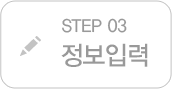
<style>
.page{position:relative;width:172px;height:89px;background:#ffffff}
.page>*{position:absolute;margin:0}
.t1{font:18px "YDVYGO33";color:#999999;scale:0.95 1}
.t2{font:26px "YDVYGO33";letter-spacing:-0.025em;color:#999999;scale:0.95 1}
</style>
<div class="page">
<p class="t1" style="left:62px;top:18px;width:65px;height:15px">STEP 03</p>
<p class="t2" style="left:61px;top:43px;width:87px;height:24px">정보입력</p>
</div>
